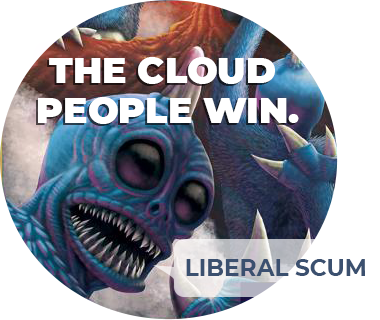
<style>
.page{position:relative;width:380px;height:320px;background:#ffffff}
.page>*{position:absolute;margin:0}
.t1{font:36.4px/40px "CMGSans-Black";color:#ffffff;text-transform:uppercase}
.t2{font:24.2px "CMGSans-Bold";color:#3b506f;text-transform:uppercase;scale:0.96 1}
</style>
<div class="page">
<p class="t1" style="left:38px;top:57px;width:261px;height:67px;text-align:center">The Cloud <br>People Win.</p>
<p class="t2" style="left:186px;top:259px;width:179px;height:17px">Liberal Scum</p>
</div>
